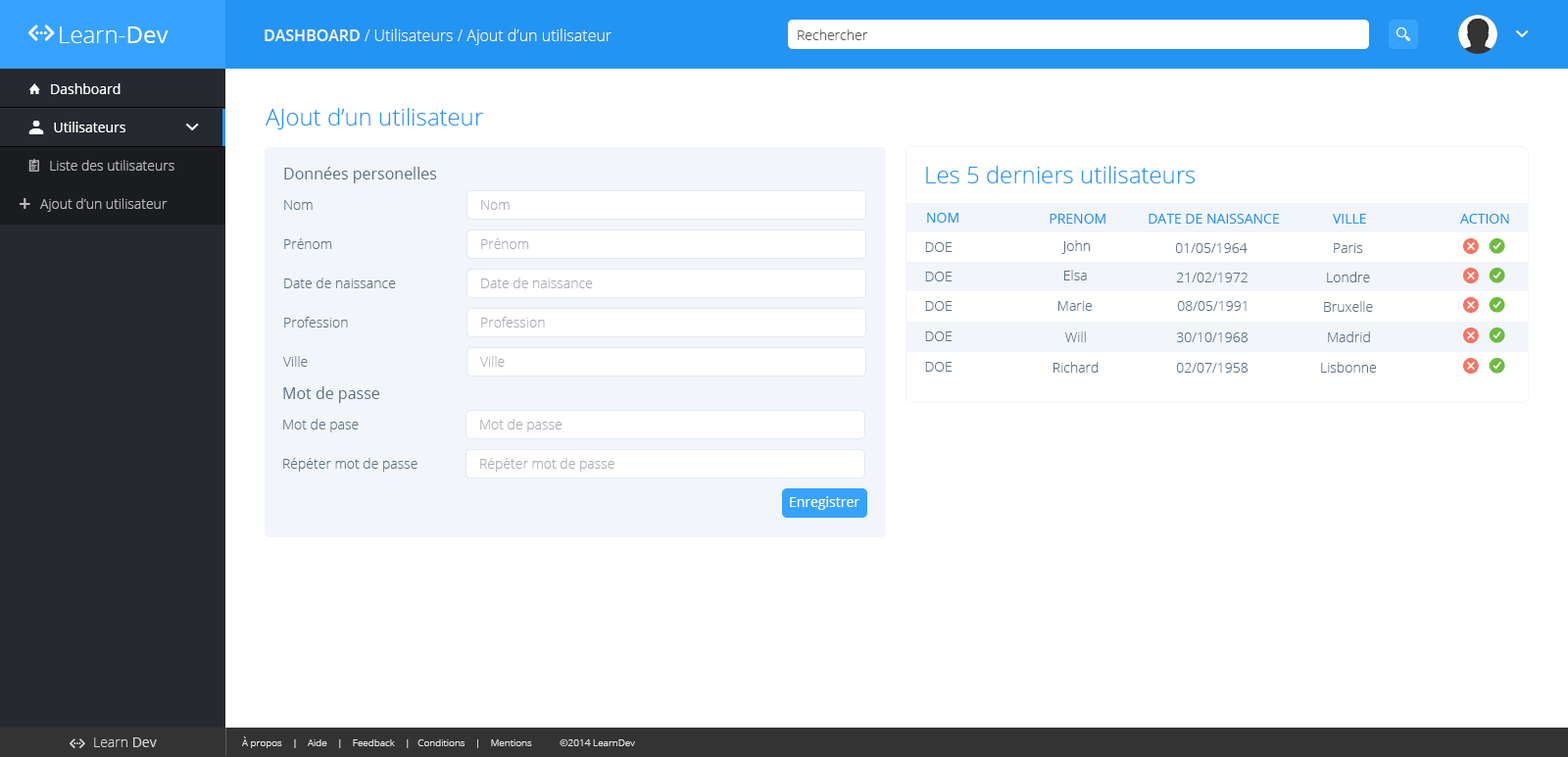
<style>
.page{position:relative;width:1568px;height:757px;background:#ffffff}
.page>*{position:absolute;margin:0}
.t1{font:23.5px "OpenSans-Light";color:#ffffff}
.t2{font:23.5px "OpenSans";color:#ffffff}
.t3{font:15.7px "OpenSans-Light";color:#f2f2f0}
.t4{font:15.7px "OpenSans-Semibold";color:#f2f2f0}
.t5{font:13.7px "OpenSans-Light";color:#555555}
.t6{font:23.5px "OpenSans-Light";color:#2494f2}
.t7{font:15.7px "OpenSans";color:#5b7086}
.t8{font:13.7px "OpenSans-Light";color:#5b7086}
.t9{font:13.7px "OpenSans-Light";color:#a9abb3}
.t10{font:13.7px "OpenSans";color:#2494f2}
.t11{font:13.7px "OpenSans-Light"}
.t12{font:13.7px "OpenSans";color:#ffffff}
.t13{font:9.8px "OpenSans-Light";color:#e0e0e0}
</style>
<div class="page">
<p class="t1" style="left:60px;top:26px;width:109px;height:17px">Learn-<span class="t2">Dev</span></p>
<p class="t3" style="left:265px;top:28px;width:347px;height:17px"><span class="t4">DASHBOARD </span>/ Utilisateurs / Ajout d’un utilisateur</p>
<p class="t5" style="left:798px;top:29px;width:69px;height:11px">Rechercher</p>
<p class="t6" style="left:266px;top:108px;width:217px;height:21px">AJout d’un utilisateur</p>
<p class="t7" style="left:284px;top:167px;width:153px;height:16px">Données personelles</p>
<p class="t6" style="left:926px;top:166px;width:270px;height:17px">Les 5 derniers utilisateurs</p>
<p class="t8" style="left:284px;top:200px;width:29px;height:10px">Nom</p>
<p class="t9" style="left:481px;top:200px;width:29px;height:10px">Nom</p>
<p class="t10" style="left:927px;top:213px;width:31px;height:9px">NOM</p>
<p class="t10" style="left:1050px;top:214px;width:55px;height:9px">PRENOM</p>
<p class="t10" style="left:1149px;top:214px;width:131px;height:9px">DATE DE NAISSANCE</p>
<p class="t10" style="left:1333px;top:214px;width:33px;height:9px">VILLE</p>
<p class="t10" style="left:1460px;top:214px;width:49px;height:9px">ACTION</p>
<p class="t8" style="left:284px;top:238px;width:48px;height:11px">Prénom</p>
<p class="t9" style="left:481px;top:238px;width:48px;height:11px">Prénom</p>
<p class="t8" style="left:925px;top:242px;width:27px;height:10px">DOE</p>
<p class="t8" style="left:1061px;top:240px;width:29px;height:14px">John</p>
<p class="t8" style="left:1175px;top:243px;width:73px;height:10px">01/05/1964</p>
<p class="t8" style="left:1334px;top:243px;width:29px;height:10px">Paris</p>
<p class="t8" style="left:1064px;top:270px;width:23px;height:10px">Elsa</p>
<p class="t8" style="left:284px;top:277px;width:112px;height:11px">Date de naissance</p>
<p class="t9" style="left:481px;top:277px;width:112px;height:11px">Date de naissance</p>
<p class="t8" style="left:925px;top:271px;width:27px;height:10px">DOE</p>
<p class="t8" style="left:1176px;top:272px;width:72px;height:10px">21/02/1972</p>
<p class="t8" style="left:1327px;top:271px;width:43px;height:11px">Londre</p>
<p class="t8" style="left:925px;top:301px;width:27px;height:10px">DOE</p>
<p class="t8" style="left:1058px;top:301px;width:34px;height:10px">Marie</p>
<p class="t8" style="left:1177px;top:301px;width:70px;height:10px">08/05/1991</p>
<p class="t8" style="left:1324px;top:301px;width:49px;height:11px">Bruxelle</p>
<p class="t8" style="left:284px;top:317px;width:64px;height:10px">Profession</p>
<p class="t9" style="left:481px;top:317px;width:64px;height:10px">Profession</p>
<p class="t8" style="left:925px;top:331px;width:27px;height:10px">DOE</p>
<p class="t11" style="left:1065px;top:331px;width:21px;height:11px">Will</p>
<p class="t8" style="left:1176px;top:332px;width:72px;height:10px">30/10/1968</p>
<p class="t8" style="left:1328px;top:331px;width:42px;height:11px">Madrid</p>
<p class="t8" style="left:283px;top:356px;width:25px;height:11px">Ville</p>
<p class="t9" style="left:480px;top:356px;width:25px;height:11px">Ville</p>
<p class="t8" style="left:925px;top:362px;width:27px;height:9px">DOE</p>
<p class="t8" style="left:1054px;top:362px;width:45px;height:10px">Richard</p>
<p class="t8" style="left:1176px;top:363px;width:72px;height:9px">02/07/1958</p>
<p class="t8" style="left:1321px;top:362px;width:55px;height:10px">Lisbonne</p>
<p class="t7" style="left:283px;top:386px;width:96px;height:17px">Mot de passe</p>
<p class="t8" style="left:283px;top:418px;width:76px;height:14px">Mot de pase</p>
<p class="t9" style="left:480px;top:418px;width:82px;height:14px">Mot de passe</p>
<p class="t8" style="left:283px;top:458px;width:134px;height:13px">Répéter mot de passe</p>
<p class="t9" style="left:480px;top:458px;width:134px;height:13px">Répéter mot de passe</p>
<p class="t12" style="left:790px;top:496px;width:69px;height:14px">Enregistrer</p>
<p class="t13" style="left:242px;top:736px;width:393px;height:12px">À propos    |    Aide    |    Feedback    |   Conditions    |    Mentions           ©2014 LearnDev</p>
</div>
